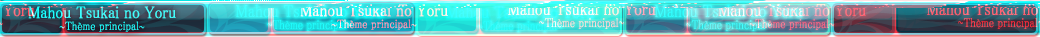
<style>
.page{position:relative;width:1040px;height:37px}
.page>*{position:absolute;margin:0}
.t1{font:16.8px/12px "MS-PMincho";font-weight:bold;scale:0.89 1}
.t2{font:12px/12px "MS-PMincho";font-weight:bold;scale:0.89 1}
.t3{font:17.7px/12px "MS-PMincho";font-weight:bold;scale:0.84 1}
.t4{font:12.7px/12px "MS-PMincho";font-weight:bold;scale:0.84 1}
</style>
<div class="page">
<p class="t1" style="left:28px;top:4px;width:148px;height:26px;text-align:center">Mahou Tsukai no Yoru <br><span class="t2">~Thème principal~</span></p>
<p class="t3" style="left:236px;top:2px;width:148px;height:27px;text-align:center">Mahou Tsukai no Yoru <br><span class="t4">~Thème principal~</span></p>
<p class="t3" style="left:446px;top:3px;width:148px;height:27px;text-align:center">Mahou Tsukai no Yoru <br><span class="t4">~Thème principal~</span></p>
<p class="t3" style="left:655px;top:2px;width:148px;height:27px;text-align:center">Mahou Tsukai no Yoru <br><span class="t4">~Thème principal~</span></p>
</div>
